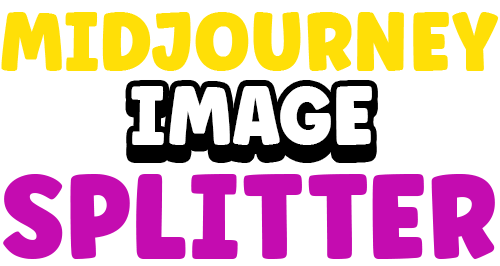
<style>
.page{position:relative;width:500px;height:266px;background:#ffffff}
.page>*{position:absolute;margin:0}
.t1{font:77.9px "AskWhy";color:#ffdf07;text-transform:uppercase}
.t2{font:77.9px "AskWhy";color:#ffffff;text-transform:uppercase}
.t3{font:111.5px "AskWhy";color:#c40cb0;text-transform:uppercase}
</style>
<div class="page">
<p class="t1" style="left:1px;top:12px;width:498px;height:59px">Midjourney</p>
<p class="t2" style="left:131px;top:86px;width:241px;height:59px">Image</p>
<p class="t3" style="left:3px;top:174px;width:492px;height:85px">Splitter</p>
</div>
